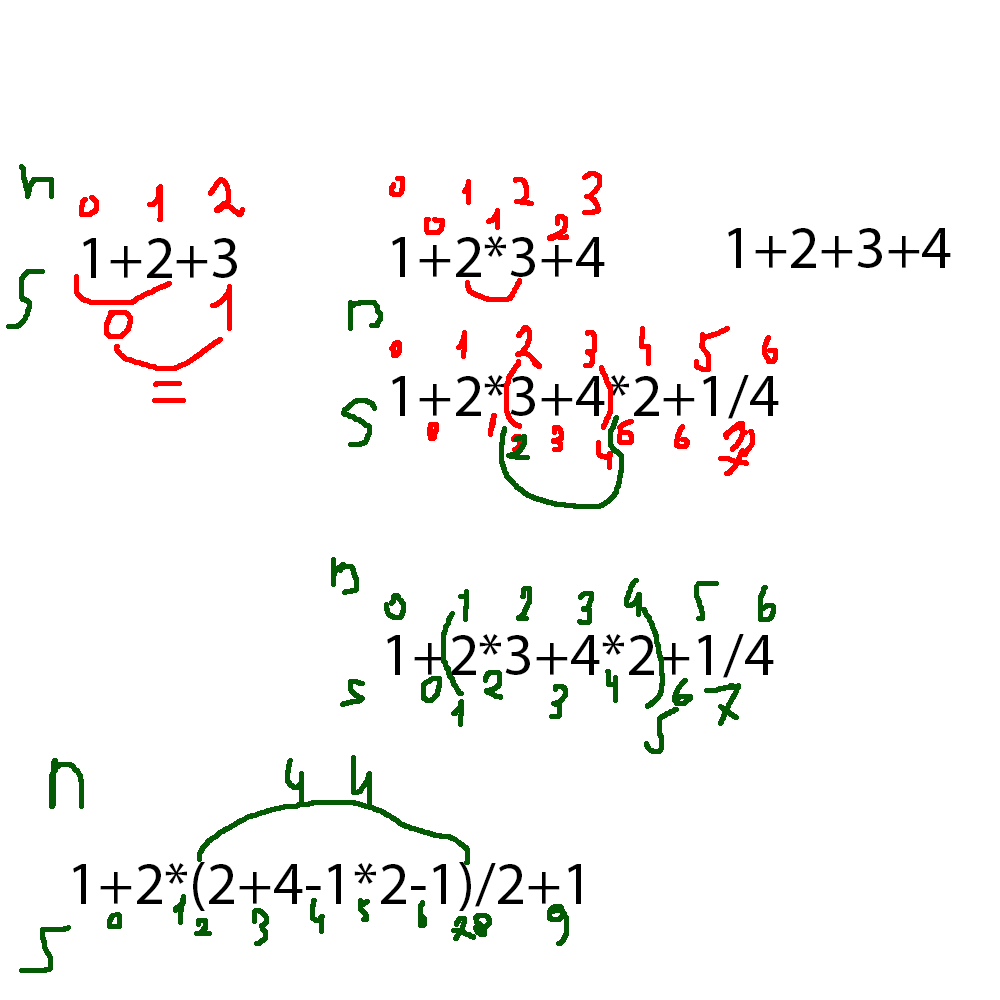
<style>
.page{position:relative;width:1000px;height:1000px;background:#ffffff}
.page>*{position:absolute;margin:0}
.t1{font:60px "MyriadPro-Regular";color:#000000}
</style>
<div class="page">
<p class="t1" style="left:728px;top:228px;width:223px;height:40px">1+2+3+4</p>
<p class="t1" style="left:83px;top:238px;width:154px;height:40px">1+2+3</p>
<p class="t1" style="left:392px;top:236px;width:213px;height:41px">1+2*3+4</p>
<p class="t1" style="left:392px;top:375px;width:387px;height:44px">1+2*3+4*2+1/4</p>
<p class="t1" style="left:387px;top:634px;width:387px;height:44px">1+2*3+4*2+1/4</p>
<p class="t1" style="left:73px;top:862px;width:508px;height:49px">1+2*(2+4-1*2-1)/2+1</p>
</div>
